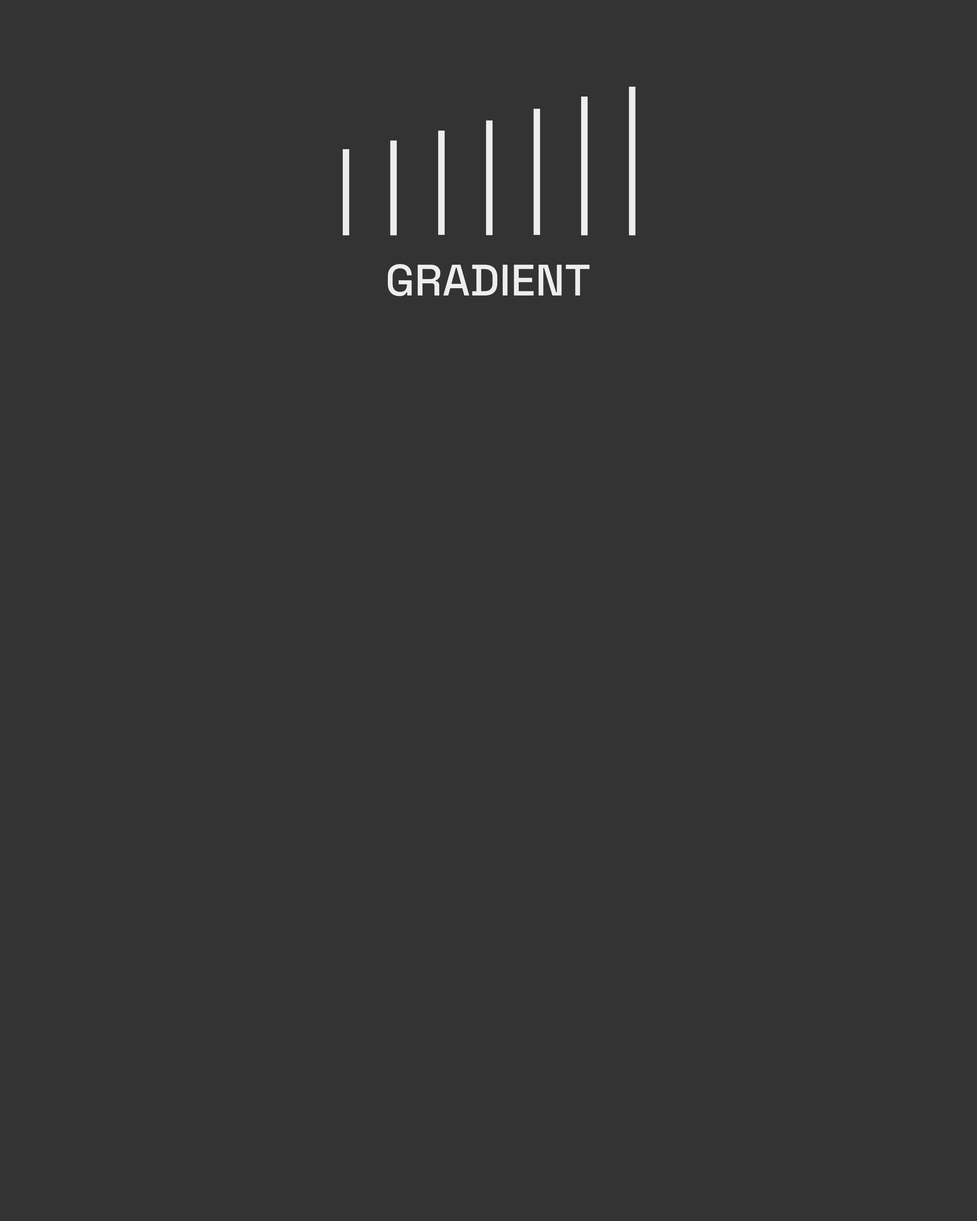
<style>
.page{position:relative;width:977px;height:1221px;background:#333333}
.page>*{position:absolute;margin:0}
.t1{font:44px "SpaceGroteskLight-Medium";color:#ededed}
</style>
<div class="page">
<p class="t1" style="left:388px;top:264px;width:201px;height:32px">GRADIENT</p>
</div>
